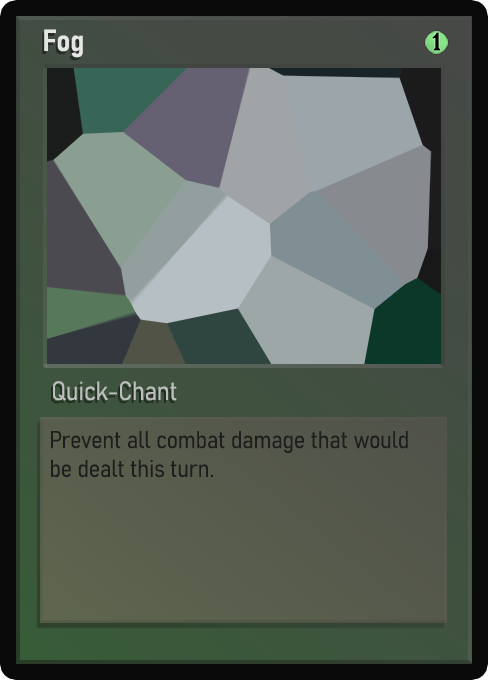
<style>
.page{position:relative;width:488px;height:680px}
.page>*{position:absolute;margin:0}
.t1{font:30px "Bahnschrift-SemiBoldSemiCondensed";color:#f2f2f2;font-weight:bold}
.t2{font:25px "WTRRoycroft";color:#000000;font-weight:bold;scale:1.09 1}
.t3{font:26px "Bahnschrift-LightSemiCondensed";color:#c8c8c8;font-weight:bold}
.t4{font:24px "Bahnschrift-LightSemiCondensed";color:#1e1e1e;font-weight:bold}
</style>
<div class="page">
<p class="t1" style="left:44px;top:29px;width:39px;height:29px;opacity:0.9">Fog</p>
<p class="t2" style="left:432px;top:32px;width:9px;height:19px">1</p>
<p class="t3" style="left:53px;top:381px;width:124px;height:20px;opacity:0.9">Quick-Chant</p>
<p class="t4" style="left:51px;top:431px;width:357px;height:47px">Prevent all combat damage that would be dealt this turn.</p>
</div>
